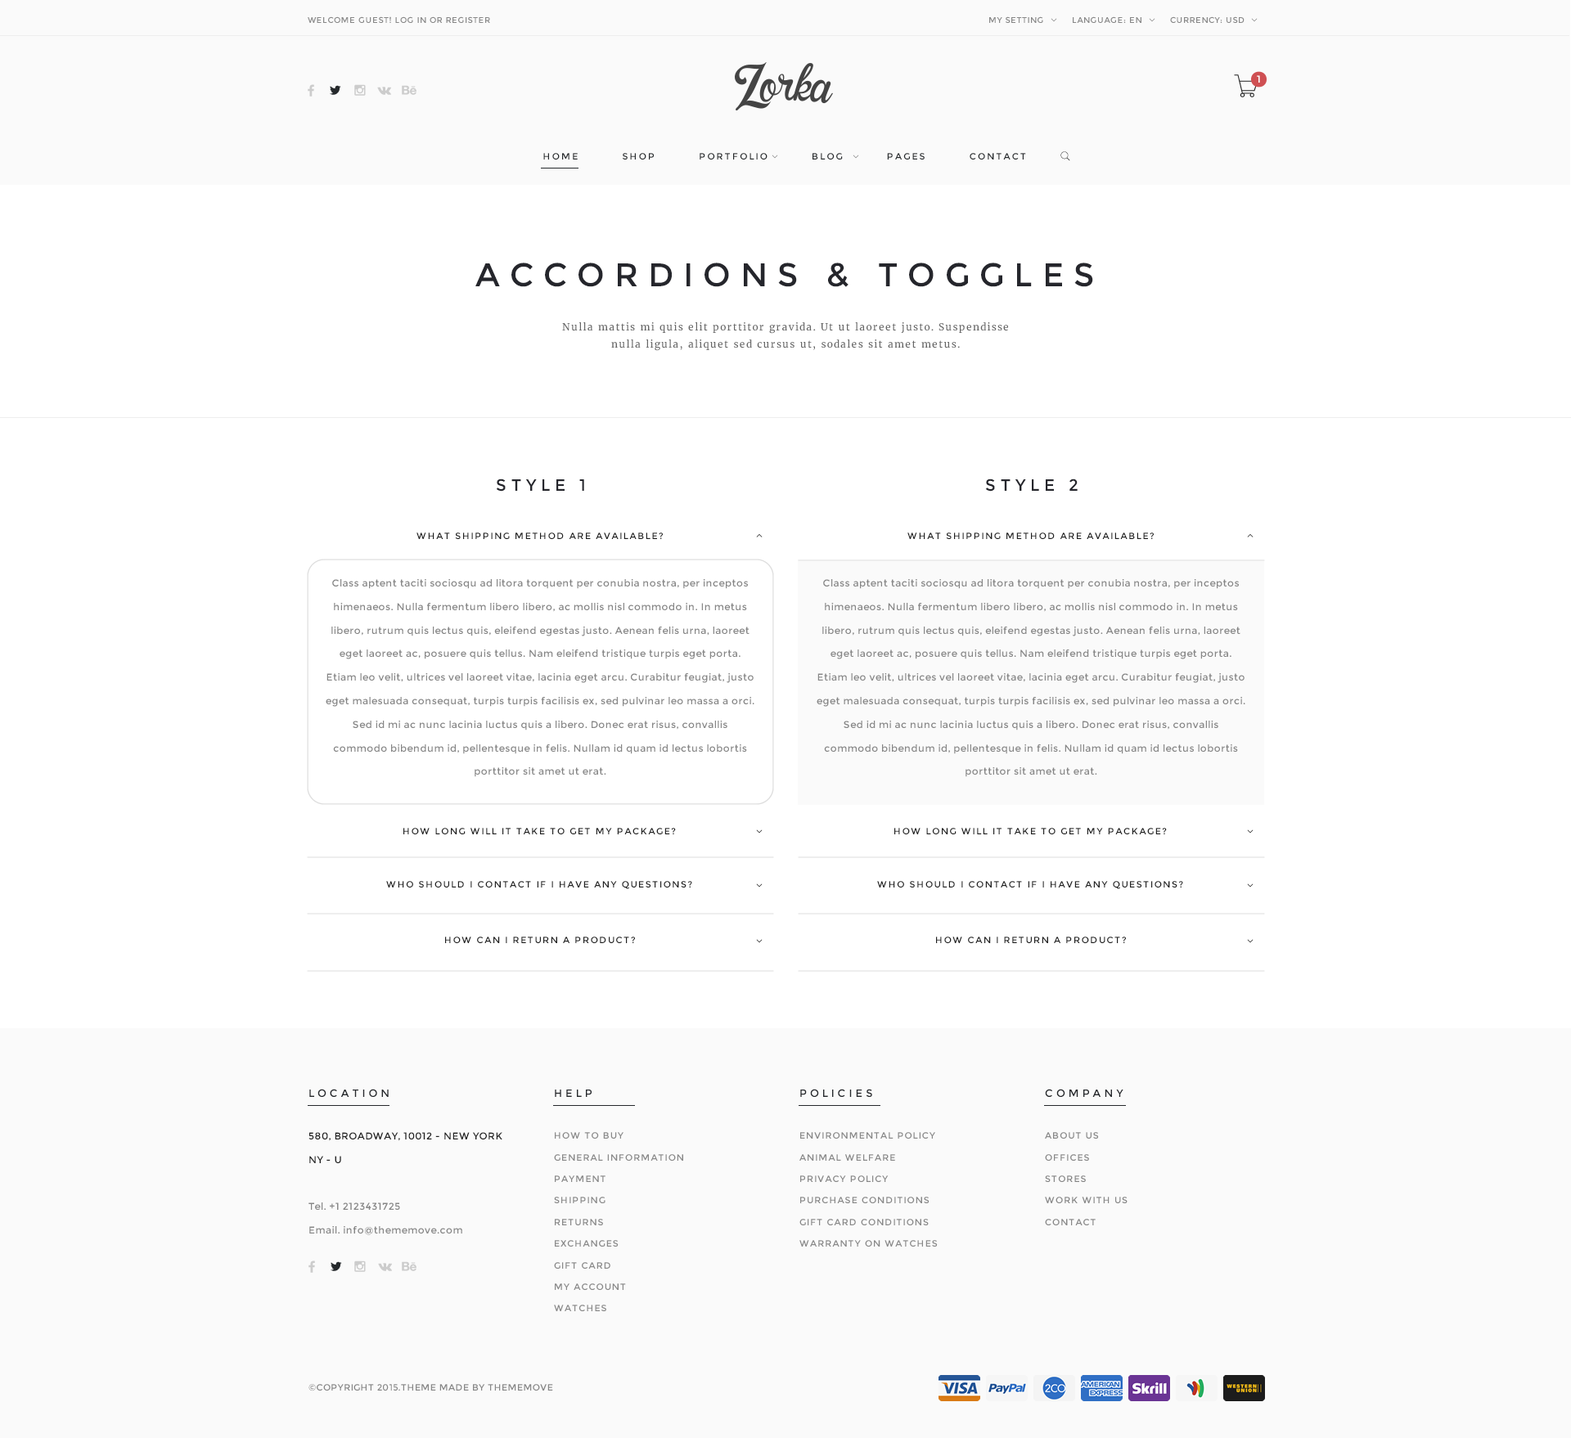
<style>
.page{position:relative;width:1571px;height:1438px;background:#ffffff}
.page>*{position:absolute;margin:0}
.t1{font:8.2px "Montserrat-Regular";letter-spacing:0.05em;color:#888888}
.t2{font:9.8px "Montserrat-Regular";letter-spacing:0.3em;color:#ffffff}
.t3{font:9px "Montserrat-Regular";letter-spacing:0.2em;color:#25292c}
.t4{font:32.7px "Montserrat-Regular";letter-spacing:0.3em;color:#25262c}
.t5{font:9.8px/17.7px "Merriweather-Regular";letter-spacing:0.1em;color:#666666}
.t6{font:16.4px "Montserrat-Regular";letter-spacing:0.3em;color:#25262c}
.t7{font:9px "Montserrat-Regular";letter-spacing:0.15em;color:#212121}
.t8{font:9.8px/23.6px "Montserrat-Regular";letter-spacing:0.04em;color:#868686}
.t9{font:10.6px "Montserrat-Regular";letter-spacing:0.3em;color:#25282c}
.t10{font:9.8px/23.6px "Montserrat-Regular";letter-spacing:0.04em;color:#202020}
.t11{font:9px/21.6px "Montserrat-Regular";letter-spacing:0.1em;color:#888888}
.t12{font:9px/21.6px "Montserrat-Regular";letter-spacing:0.1em;color:#878787}
.t13{font:9px "Montserrat-Regular";letter-spacing:0.04em;color:#868686}
</style>
<div class="page">
<p class="t1" style="left:308px;top:16px;width:182px;height:7px">WELCOME GUEST! LOG IN OR REGISTER</p>
<p class="t1" style="left:989px;top:16px;width:54px;height:7px">MY SETTING</p>
<p class="t1" style="left:1073px;top:16px;width:68px;height:7px">LANGUAGE: EN</p>
<p class="t1" style="left:1170px;top:16px;width:74px;height:7px">CURRENCY: USD</p>
<p class="t2" style="left:1257px;top:75px;width:3px;height:8px">1</p>
<p class="t3" style="left:543px;top:153px;width:483px;height:7px">HOME          SHOP          PORTFOLIO          BLOG          PAGES          CONTACT</p>
<p class="t4" style="left:475px;top:263px;width:618px;height:24px">ACCORDIONS &amp; TOGGLES</p>
<p class="t5" style="left:562px;top:322px;width:446px;height:29px;text-align:center">Nulla mattis mi quis elit porttitor gravida. Ut ut laoreet justo. Suspendisse nulla ligula, aliquet sed cursus ut, sodales sit amet metus.</p>
<p class="t6" style="left:496px;top:479px;width:88px;height:13px">STYLE 1</p>
<p class="t6" style="left:985px;top:479px;width:93px;height:13px">STYLE 2</p>
<p class="t7" style="left:416px;top:533px;width:247px;height:6px">WHAT SHIPPING METHOD ARE AVAILABLE?</p>
<p class="t7" style="left:907px;top:533px;width:247px;height:6px">WHAT SHIPPING METHOD ARE AVAILABLE?</p>
<p class="t8" style="left:326px;top:579px;width:428px;height:198px;text-align:center">Class aptent taciti sociosqu ad litora torquent per conubia nostra, per inceptos himenaeos. Nulla fermentum libero libero, ac mollis nisl commodo in. In metus libero, rutrum quis lectus quis, eleifend egestas justo. Aenean felis urna, laoreet eget laoreet ac, posuere quis tellus. Nam eleifend tristique turpis eget porta. Etiam leo velit, ultrices vel laoreet vitae, lacinia eget arcu. Curabitur feugiat, justo eget malesuada consequat, turpis turpis facilisis ex, sed pulvinar leo massa a orci. Sed id mi ac nunc lacinia luctus quis a libero. Donec erat risus, convallis commodo bibendum id, pellentesque in felis. Nullam id quam id lectus lobortis porttitor sit amet ut erat.</p>
<p class="t8" style="left:817px;top:579px;width:428px;height:198px;text-align:center">Class aptent taciti sociosqu ad litora torquent per conubia nostra, per inceptos himenaeos. Nulla fermentum libero libero, ac mollis nisl commodo in. In metus libero, rutrum quis lectus quis, eleifend egestas justo. Aenean felis urna, laoreet eget laoreet ac, posuere quis tellus. Nam eleifend tristique turpis eget porta. Etiam leo velit, ultrices vel laoreet vitae, lacinia eget arcu. Curabitur feugiat, justo eget malesuada consequat, turpis turpis facilisis ex, sed pulvinar leo massa a orci. Sed id mi ac nunc lacinia luctus quis a libero. Donec erat risus, convallis commodo bibendum id, pellentesque in felis. Nullam id quam id lectus lobortis porttitor sit amet ut erat.</p>
<p class="t7" style="left:403px;top:828px;width:273px;height:7px">HOW LONG WILL IT TAKE TO GET MY PACKAGE?</p>
<p class="t7" style="left:894px;top:828px;width:273px;height:7px">HOW LONG WILL IT TAKE TO GET MY PACKAGE?</p>
<p class="t7" style="left:386px;top:881px;width:306px;height:8px">WHO SHOULD I CONTACT IF I HAVE ANY QUESTIONS?</p>
<p class="t7" style="left:877px;top:881px;width:306px;height:8px">WHO SHOULD I CONTACT IF I HAVE ANY QUESTIONS?</p>
<p class="t7" style="left:445px;top:937px;width:190px;height:6px">HOW CAN I RETURN A PRODUCT?</p>
<p class="t7" style="left:936px;top:937px;width:190px;height:6px">HOW CAN I RETURN A PRODUCT?</p>
<p class="t9" style="left:309px;top:1089px;width:80px;height:8px">LOCATION</p>
<p class="t9" style="left:555px;top:1090px;width:37px;height:7px">HELP</p>
<p class="t9" style="left:800px;top:1089px;width:72px;height:8px">POLICIES</p>
<p class="t9" style="left:1045px;top:1089px;width:78px;height:8px">COMPANY</p>
<p class="t8" style="left:308px;top:1132px;width:194px;height:103px"><span class="t10">580, BROADWAY, 10012 - NEW YORK <br>NY - U<br><br></span>Tel. +1 2123431725<br>Email. info@thememove.com</p>
<p class="t11" style="left:554px;top:1132px;width:129px;height:180px">HOW TO BUY<br>GENERAL INFORMATION<br>PAYMENT<br>SHIPPING<br>RETURNS<br>EXCHANGES<br>GIFT CARD<br>MY ACCOUNT<br>WATCHES</p>
<p class="t11" style="left:799px;top:1132px;width:139px;height:115px">ENVIRONMENTAL POLICY<br>ANIMAL WELFARE<br>PRIVACY POLICY<br>PURCHASE CONDITIONS<br>GIFT CARD CONDITIONS<br>WARRANTY ON WATCHES</p>
<p class="t12" style="left:1045px;top:1132px;width:82px;height:94px">ABOUT US<br>OFFICES<br>STORES<br>WORK WITH US<br>CONTACT</p>
<p class="t13" style="left:308px;top:1384px;width:245px;height:8px">©COPYRIGHT 2015.THEME MADE BY THEMEMOVE</p>
</div>
